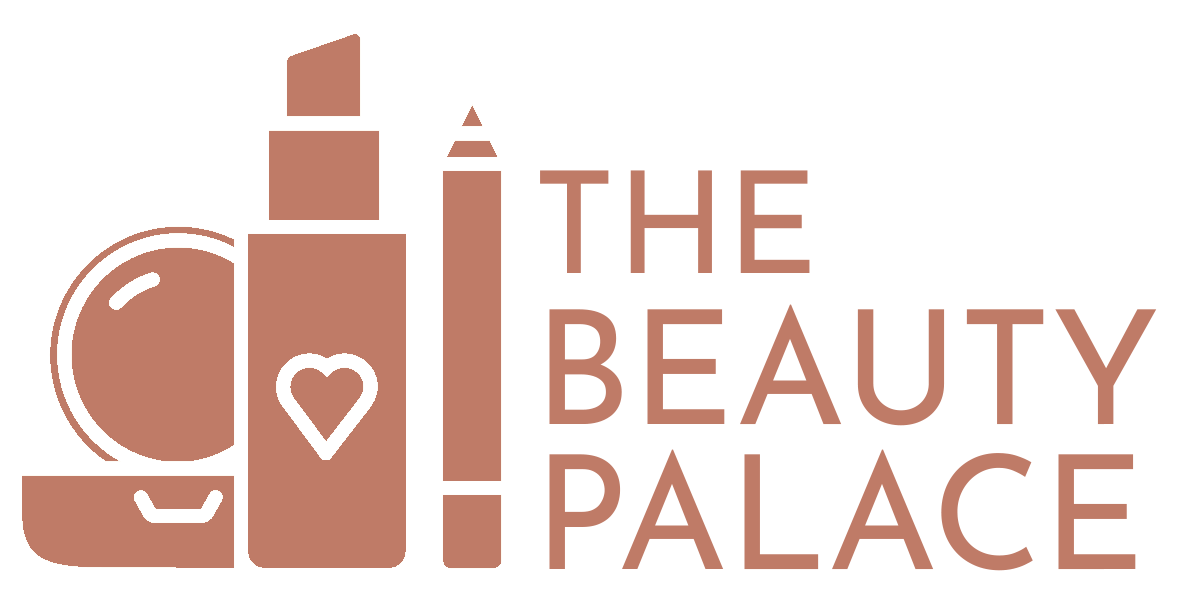
<style>
.page{position:relative;width:1181px;height:603px;background:#ffffff}
.page>*{position:absolute;margin:0}
.t1{font:141.8px "JosefinSansRoman-Regular";color:#bf7b67}
.t2{font:158.6px "JosefinSansRoman-Regular";color:#bf7b67}
</style>
<div class="page">
<p class="t1" style="left:540px;top:170px;width:270px;height:103px">THE</p>
<p class="t2" style="left:549px;top:304px;width:608px;height:122px">BEAUTY</p>
<p class="t2" style="left:549px;top:449px;width:587px;height:122px">PALACE</p>
</div>
